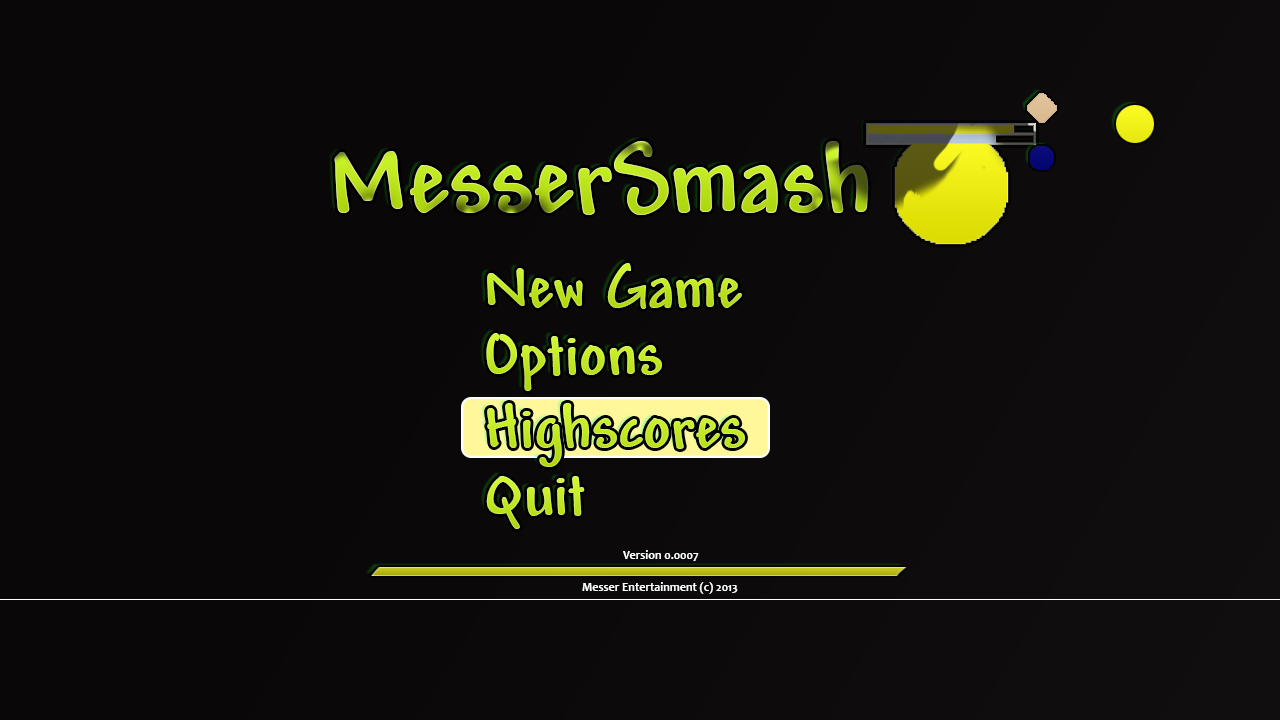
<style>
.page{position:relative;width:1280px;height:720px;background:#0a0708}
.page>*{position:absolute;margin:0}
.t1{font:104px "Andy-Bold"}
.t2{font:64px "Andy-Bold";color:#bde420}
.t3{font:64px "Andy-Bold";color:#c5eb27}
.t4{font:64px "Andy-Bold";color:#c4eb27}
.t5{font:64px "Andy-Bold";color:#c5eb28}
.t6{font:12px "Candara-Bold";color:#ffffff}
</style>
<div class="page">
<p class="t1" style="left:334px;top:141px;width:535px;height:74px">MesserSmash</p>
<p class="t2" style="left:487px;top:263px;width:255px;height:46px">New Game</p>
<p class="t3" style="left:486px;top:333px;width:176px;height:58px">Options</p>
<p class="t4" style="left:487px;top:403px;width:258px;height:64px">Highscores</p>
<p class="t5" style="left:486px;top:476px;width:99px;height:53px">Quit</p>
<p class="t6" style="left:623px;top:550px;width:76px;height:11px">Version 0.0007</p>
<p class="t6" style="left:582px;top:582px;width:156px;height:12px">Messer Entertainment (c) 2013</p>
</div>
